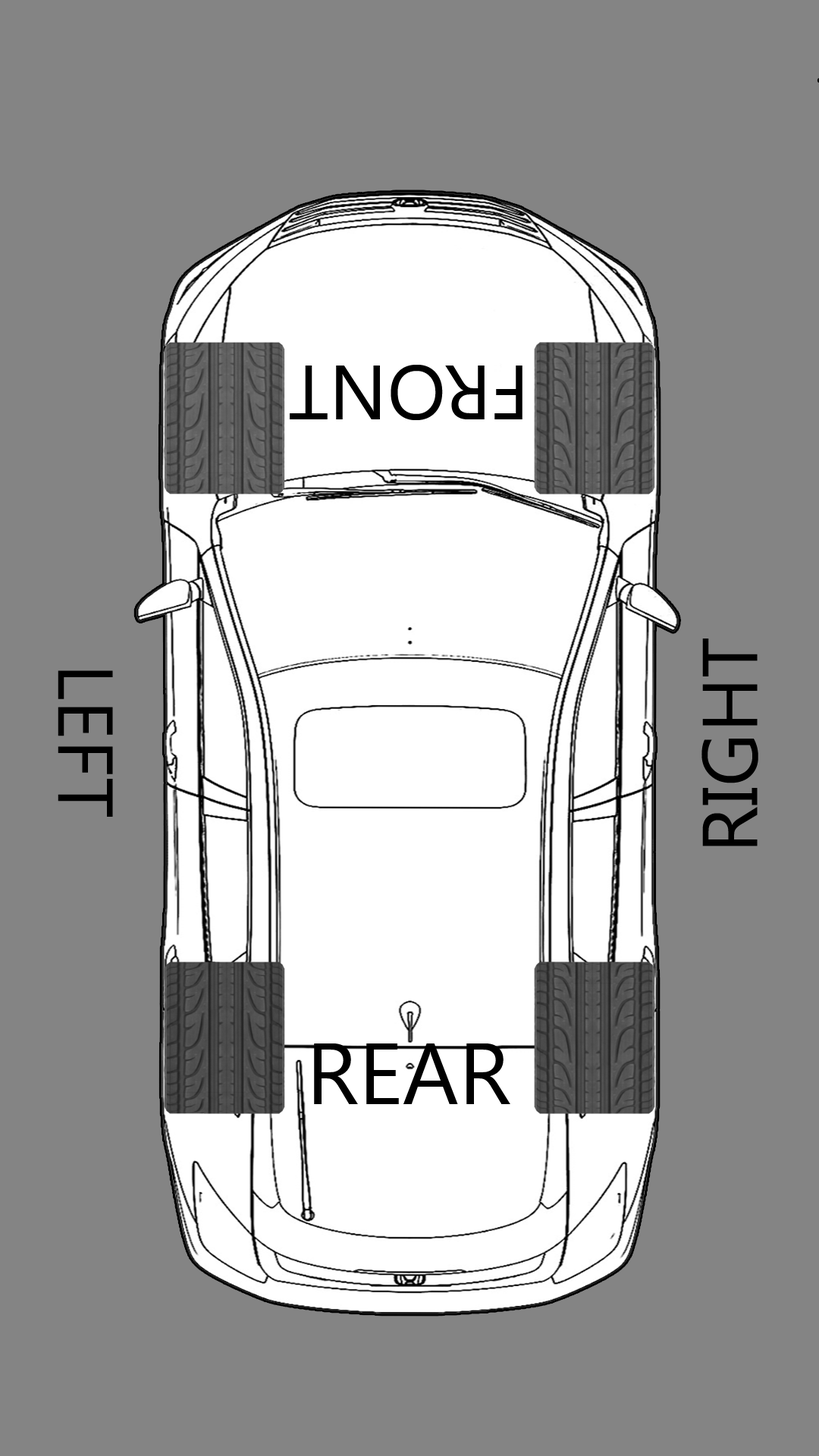
<style>
.page{position:relative;width:819px;height:1456px;background:#848484}
.page>*{position:absolute;margin:0}
.t1{font:77.7px "KhmerUI";color:#000000}
.t2{font:86.8px "KhmerUI";color:#000000}
</style>
<div class="page">
<p class="t1" style="left:290px;top:365px;width:232px;height:55px;rotate:180deg">FRONT</p>
<p class="t1" style="left:701px;top:639px;width:57px;height:207px;rotate:-90deg">RIGHT</p>
<p class="t1" style="left:58px;top:670px;width:55px;height:147px;rotate:90deg">LEFT</p>
<p class="t2" style="left:314px;top:1043px;width:196px;height:61px">REAR</p>
</div>
